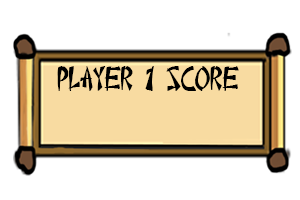
<style>
.page{position:relative;width:300px;height:200px;background:#ffffff}
.page>*{position:absolute;margin:0}
.t1{font:25px "ChineseTakeaway";color:#000000}
</style>
<div class="page">
<p class="t1" style="left:57px;top:66px;width:182px;height:25px">player 1 Score</p>
</div>
